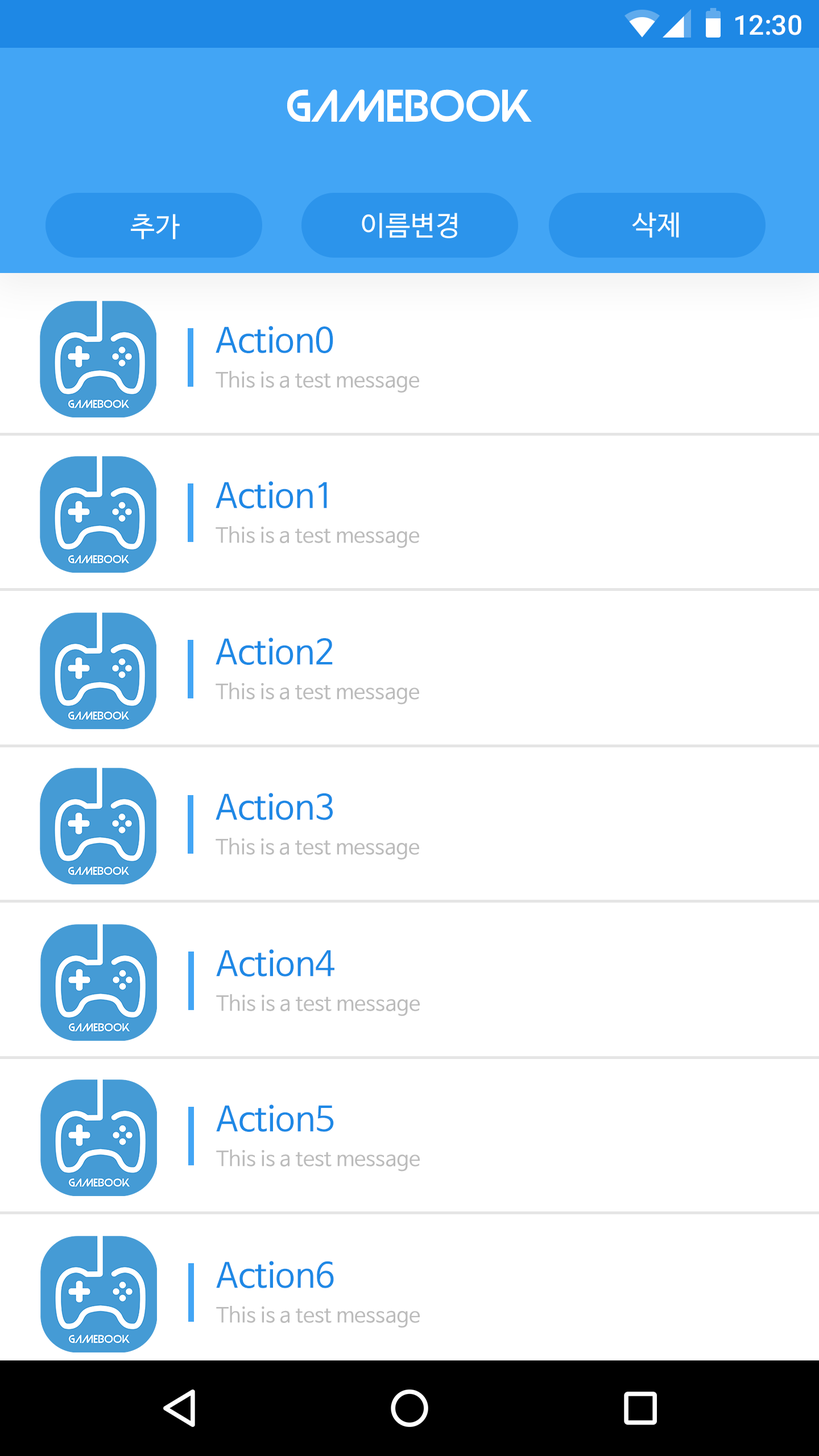
<style>
.page{position:relative;width:819px;height:1456px;background:#ffffff}
.page>*{position:absolute;margin:0}
.t1{font:27.3px "Roboto-Medium";color:#ffffff}
.t2{font:40.9px "Strasua-Regular";color:#ffffff}
.t3{font:34.1px "NanumBarunGothic";color:#1e88e5}
.t4{font:20.5px "NanumBarunGothic";color:#bbbbbb}
</style>
<div class="page">
<p class="t1" style="left:735px;top:15px;width:66px;height:20px">12:30</p>
<p class="t2" style="left:287px;top:89px;width:245px;height:33px">GaMEBook</p>
<p class="t3" style="left:216px;top:326px;width:117px;height:27px">Action0</p>
<p class="t4" style="left:216px;top:371px;width:203px;height:22px">This is a test message</p>
<p class="t3" style="left:216px;top:481px;width:111px;height:27px">Action1</p>
<p class="t4" style="left:216px;top:526px;width:203px;height:22px">This is a test message</p>
<p class="t3" style="left:216px;top:638px;width:117px;height:27px">Action2</p>
<p class="t4" style="left:216px;top:682px;width:203px;height:23px">This is a test message</p>
<p class="t3" style="left:216px;top:793px;width:117px;height:27px">Action3</p>
<p class="t4" style="left:216px;top:838px;width:203px;height:22px">This is a test message</p>
<p class="t3" style="left:216px;top:949px;width:118px;height:28px">Action4</p>
<p class="t4" style="left:216px;top:994px;width:204px;height:22px">This is a test message</p>
<p class="t3" style="left:216px;top:1104px;width:118px;height:28px">Action5</p>
<p class="t4" style="left:216px;top:1149px;width:204px;height:23px">This is a test message</p>
<p class="t3" style="left:216px;top:1261px;width:118px;height:27px">Action6</p>
<p class="t4" style="left:216px;top:1306px;width:204px;height:22px">This is a test message</p>
</div>
